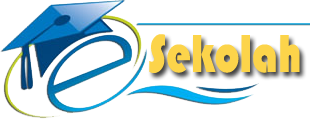
<style>
.page{position:relative;width:310px;height:119px;background:#ffffff}
.page>*{position:absolute;margin:0}
.t1{font:55.3px "Bauhaus93";color:#fcd44a;scale:0.8 1}
</style>
<div class="page">
<p class="t1" style="left:149px;top:34px;width:151px;height:39px">Sekolah</p>
</div>
